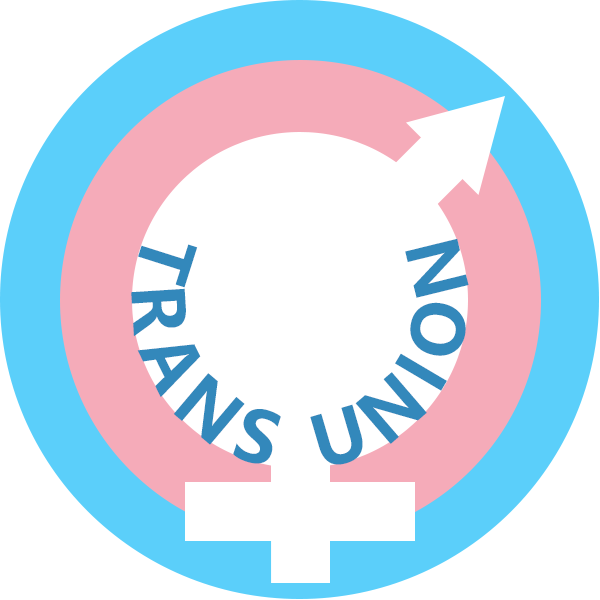
<style>
.page{position:relative;width:600px;height:600px;background:#ffffff}
.page>*{position:absolute;margin:0}
.t1{font:70.8px "MicrosoftYaHeiUI-Bold";letter-spacing:0.2em;color:#3388bb}
</style>
<div class="page">
<p class="t1" style="left:131px;top:238px;width:338px;height:227px;text-align:center">TRANS UNION</p>
</div>
